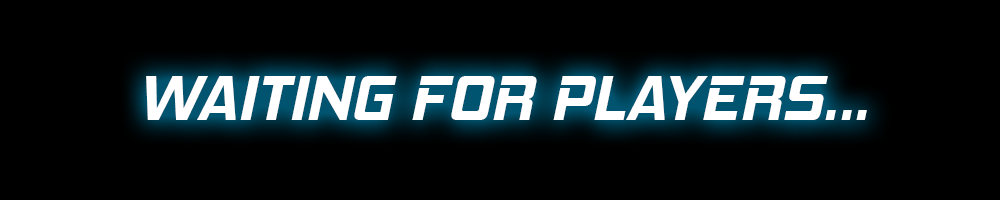
<style>
.page{position:relative;width:1000px;height:200px;background:#000000}
.page>*{position:absolute;margin:0}
.t1{font:64px "HemiHeadRg-BoldItalic";color:#ffffff}
</style>
<div class="page">
<p class="t1" style="left:146px;top:76px;width:721px;height:44px">WAITING FOR PLAYERS...</p>
</div>
